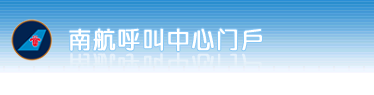
<style>
.page{position:relative;width:374px;height:95px;background:#ffffff}
.page>*{position:absolute;margin:0}
.t1{font:24px "CTZhongYuanSJ";color:#ffffff;font-weight:bold}
</style>
<div class="page">
<p class="t1" style="left:69px;top:28px;width:193px;height:23px">南航呼叫中心门户</p>
</div>
